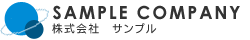
<style>
.page{position:relative;width:250px;height:40px;background:#ffffff}
.page>*{position:absolute;margin:0}
.t1{font:18px "CenturyGothic-Bold";letter-spacing:0.1em;color:#333333}
.t2{font:11px "DFGothicP-W5-WING-RKSJ-H";letter-spacing:0.1em;color:#333333}
</style>
<div class="page">
<p class="t1" style="left:53px;top:5px;width:187px;height:15px">SAMPLE COMPANY</p>
<p class="t2" style="left:52px;top:23px;width:105px;height:11px">株式会社 サンプル</p>
</div>
